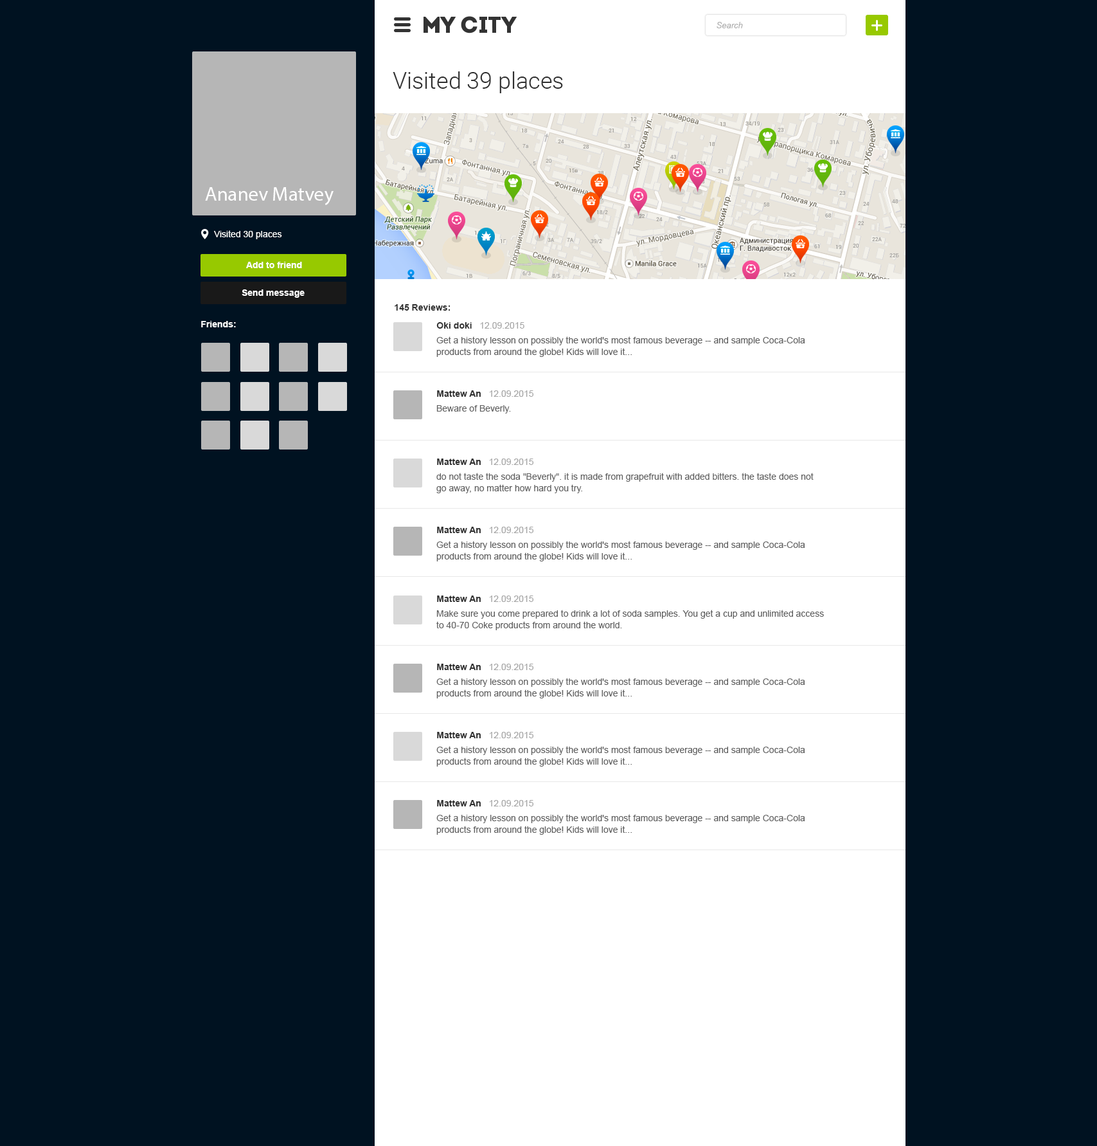
<style>
.page{position:relative;width:1097px;height:1146px;background:#001221}
.page>*{position:absolute;margin:0}
.t1{font:8.4px "Arial-ItalicMT";color:#acacac}
.t2{font:23.1px "Roboto-Light";color:#2f2f2f}
.t3{font:19.9px "MyriadPro-Regular";color:#ffffff}
.t4{font:9px "ArialMT";color:#ffffff}
.t5{font:9px "Arial-BoldMT";color:#ffffff}
.t6{font:9px "Arial-BoldMT";color:#2f2f2f}
.t7{font:9px "ArialMT";color:#a5a5a5}
.t8{font:9px/11.6px "ArialMT";color:#606060}
.t9{font:9px "ArialMT";color:#606060}
</style>
<div class="page">
<p class="t1" style="left:717px;top:22px;width:26px;height:6px">Search</p>
<p class="t2" style="left:393px;top:71px;width:170px;height:22px">Visited 39 places</p>
<p class="t3" style="left:205px;top:187px;width:129px;height:18px">Ananev Matvey</p>
<p class="t4" style="left:214px;top:230px;width:68px;height:9px">Visited 30 places</p>
<p class="t5" style="left:246px;top:262px;width:56px;height:6px">Add to friend</p>
<p class="t5" style="left:242px;top:289px;width:63px;height:9px">Send message</p>
<p class="t6" style="left:395px;top:304px;width:56px;height:6px">145 Reviews:</p>
<p class="t5" style="left:201px;top:321px;width:35px;height:6px">Friends:</p>
<p class="t7" style="left:437px;top:322px;width:88px;height:6px"><span class="t6">Oki doki   </span>12.09.2015</p>
<p class="t8" style="left:437px;top:336px;width:369px;height:21px">Get a history lesson on possibly the world's most famous beverage -- and sample Coca-Cola products from around the globe! Kids will love it...</p>
<p class="t7" style="left:437px;top:390px;width:97px;height:7px"><span class="t6">Mattew An   </span>12.09.2015</p>
<p class="t9" style="left:437px;top:405px;width:74px;height:8px">Beware of Beverly.</p>
<p class="t7" style="left:437px;top:458px;width:97px;height:7px"><span class="t6">Mattew An   </span>12.09.2015</p>
<p class="t8" style="left:437px;top:473px;width:377px;height:20px">do not taste the soda "Beverly". it is made from grapefruit with added bitters. the taste does not go away, no matter how hard you try.</p>
<p class="t7" style="left:437px;top:526px;width:97px;height:7px"><span class="t6">Mattew An   </span>12.09.2015</p>
<p class="t8" style="left:437px;top:541px;width:369px;height:20px">Get a history lesson on possibly the world's most famous beverage -- and sample Coca-Cola products from around the globe! Kids will love it...</p>
<p class="t7" style="left:437px;top:595px;width:97px;height:7px"><span class="t6">Mattew An   </span>12.09.2015</p>
<p class="t8" style="left:437px;top:609px;width:387px;height:21px">Make sure you come prepared to drink a lot of soda samples. You get a cup and unlimited access to 40-70 Coke products from around the world.</p>
<p class="t7" style="left:437px;top:663px;width:97px;height:7px"><span class="t6">Mattew An   </span>12.09.2015</p>
<p class="t8" style="left:437px;top:678px;width:369px;height:20px">Get a history lesson on possibly the world's most famous beverage -- and sample Coca-Cola products from around the globe! Kids will love it...</p>
<p class="t7" style="left:437px;top:732px;width:97px;height:6px"><span class="t6">Mattew An   </span>12.09.2015</p>
<p class="t8" style="left:437px;top:746px;width:369px;height:20px">Get a history lesson on possibly the world's most famous beverage -- and sample Coca-Cola products from around the globe! Kids will love it...</p>
<p class="t7" style="left:437px;top:800px;width:97px;height:6px"><span class="t6">Mattew An   </span>12.09.2015</p>
<p class="t8" style="left:437px;top:814px;width:369px;height:20px">Get a history lesson on possibly the world's most famous beverage -- and sample Coca-Cola products from around the globe! Kids will love it...</p>
</div>
